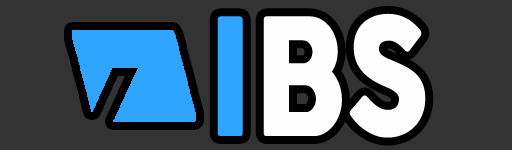
<style>
.page{position:relative;width:512px;height:150px;background:#333333}
.page>*{position:absolute;margin:0}
.t1{font:161px "COCOGOOSE";color:#fefefe;scale:0.81 1}
.t2{font:161px "COCOGOOSE";color:#30a5ff;scale:0.81 1}
</style>
<div class="page">
<p class="t1" style="left:217px;top:13px;width:209px;height:125px"><span class="t2">I</span>BS</p>
</div>
